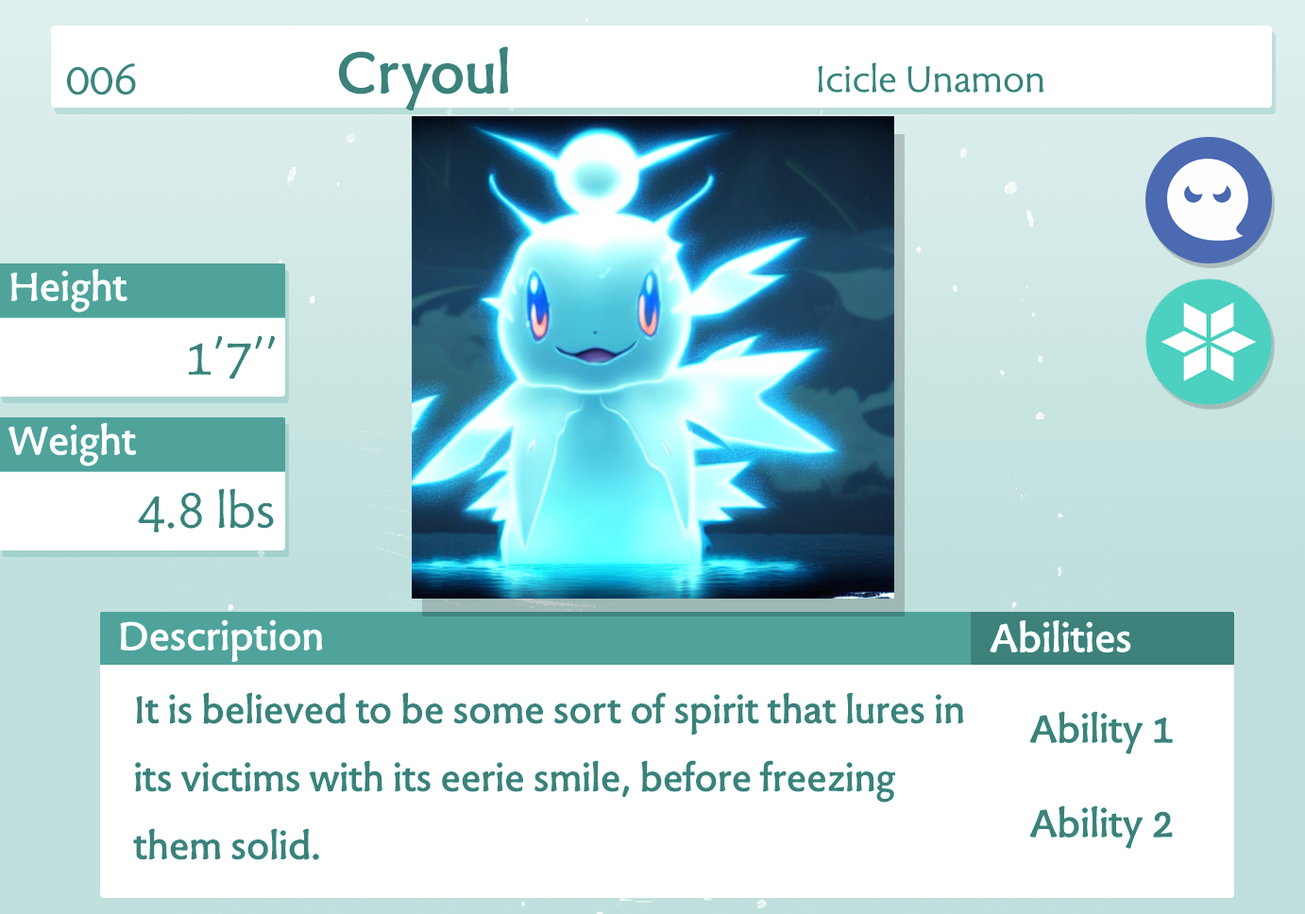
<style>
.page{position:relative;width:1305px;height:914px;background:#ffffff}
.page>*{position:absolute;margin:0}
.t1{font:68px "TuffW01-Bold";color:#3e807a}
.t2{font:49.5px "TuffW01-Normal";color:#3f827c}
.t3{font:42.8px "TuffW01-Normal";color:#3e807a}
.t4{font:46.3px "TuffW01-Bold";color:#ffffff}
.t5{font:56.7px "TuffW01-Normal";color:#3e807a}
.t6{font:44.6px/68px "TuffW01-Bold";color:#3e807a}
.t7{font:45.3px/94.4px "TuffW01-Bold";color:#3e807a}
</style>
<div class="page">
<p class="t1" style="left:339px;top:46px;width:170px;height:64px">Cryoul</p>
<p class="t2" style="left:66px;top:63px;width:70px;height:32px">006</p>
<p class="t3" style="left:818px;top:62px;width:225px;height:31px">Icicle Unamon</p>
<p class="t4" style="left:10px;top:269px;width:117px;height:44px">Height</p>
<p class="t5" style="left:188px;top:335px;width:88px;height:44px">1’7’’</p>
<p class="t4" style="left:8px;top:423px;width:128px;height:43px">Weight</p>
<p class="t5" style="left:138px;top:488px;width:136px;height:44px">4.8 lbs</p>
<p class="t4" style="left:120px;top:619px;width:203px;height:43px">Description</p>
<p class="t4" style="left:989px;top:620px;width:142px;height:32px">Abilities</p>
<p class="t6" style="left:133px;top:692px;width:831px;height:168px">It is believed to be some sort of spirit that lures in<br>its victims with its eerie smile, before freezing<br>them solid.</p>
<p class="t7" style="left:1029px;top:711px;width:144px;height:138px;text-align:center">Ability 1<br>Ability 2</p>
</div>
